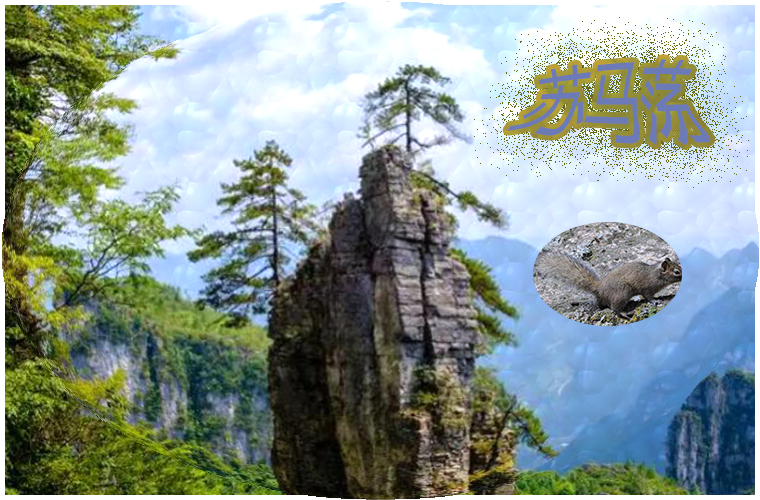
<style>
.page{position:relative;width:760px;height:500px}
.page>*{position:absolute;margin:0}
.t1{font:70px "MicrosoftYaHei";color:#6c7bb8;font-style:italic}
</style>
<div class="page">
<p class="t1" style="left:507px;top:59px;width:204px;height:86px">苏马荡</p>
</div>
